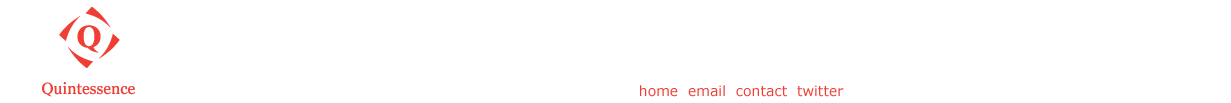
<style>
.page{position:relative;width:1231px;height:103px;background:#ffffff}
.page>*{position:absolute;margin:0}
.t1{font:14px "Verdana";color:#ef3f35}
</style>
<div class="page">
<p class="t1" style="left:640px;top:85px;width:204px;height:12px">home  email  contact  twitter</p>
</div>
